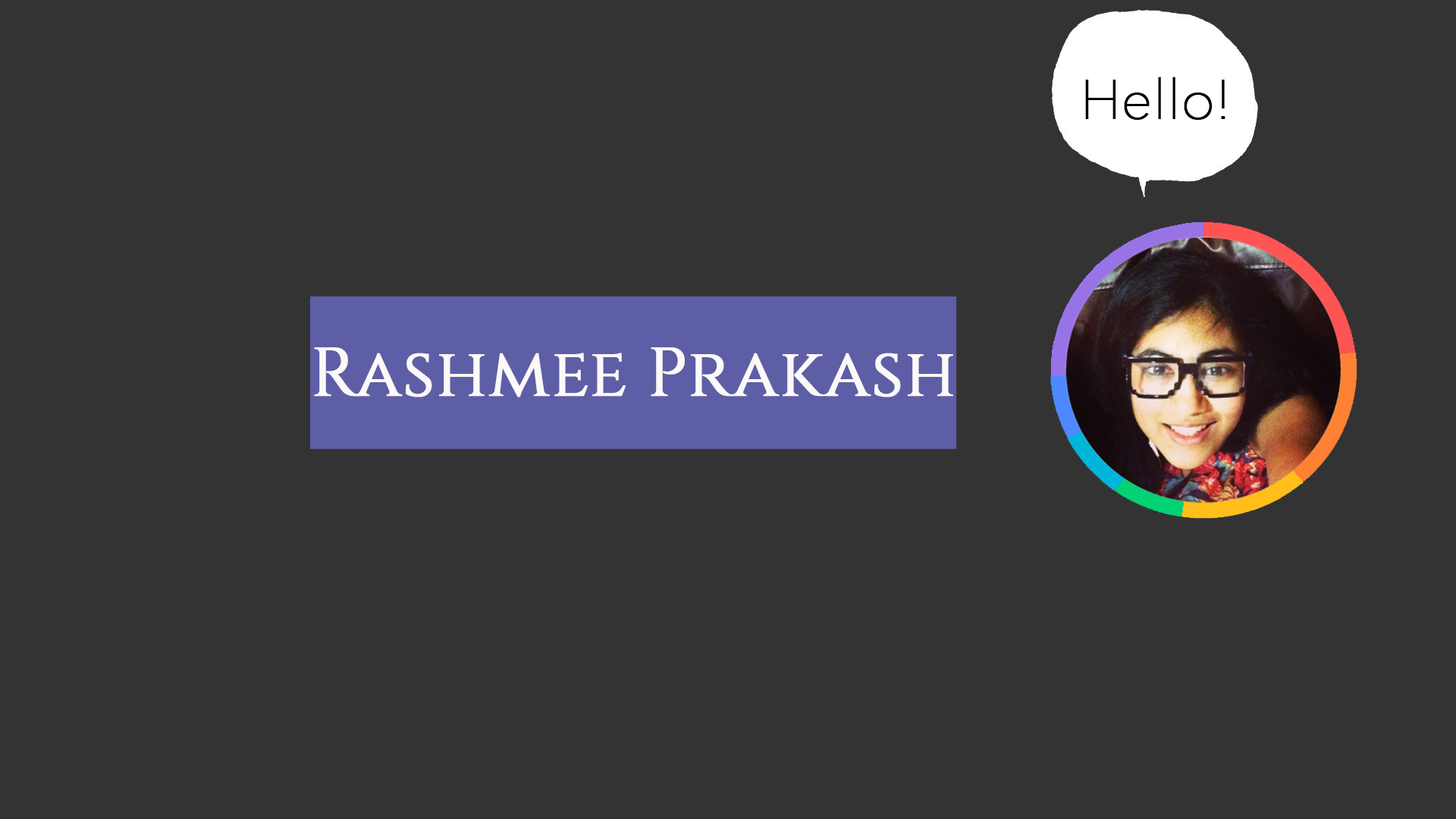
<style>
.page{position:relative;width:1456px;height:819px;background:#333333}
.page>*{position:absolute;margin:0}
.t1{font:68.2px "Cinzel-Regular";color:#fcf9f9;font-weight:bold}
</style>
<div class="page">
<p class="t1" style="left:314px;top:347px;width:639px;height:50px">Rashmee Prakash</p>
</div>
